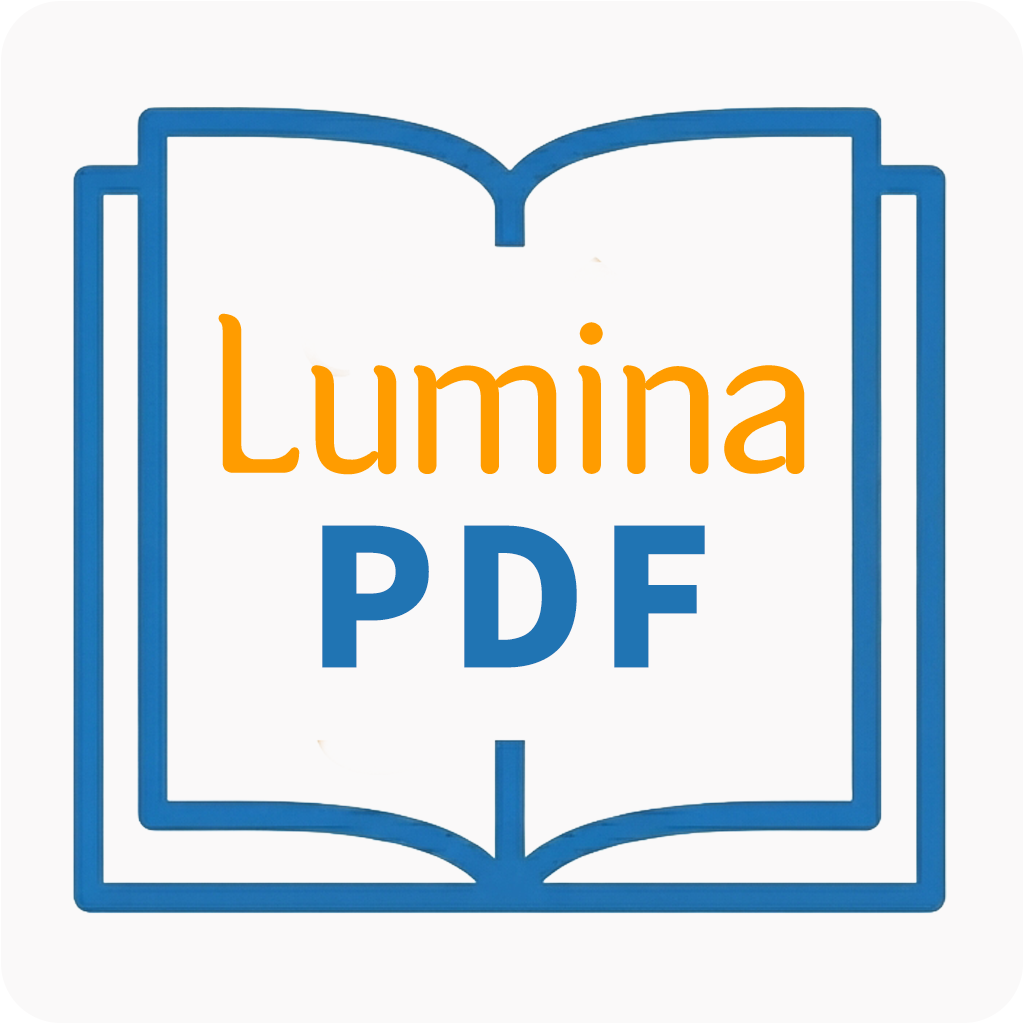
<style>
.page{position:relative;width:1024px;height:1024px;background:#faf9f9}
.page>*{position:absolute;margin:0}
.t1{font:200.7px "tearsfontvf12Variable_90.000ROND_0ital";color:#ff9c00}
.t2{font:190.1px "NotoSansTC-Black";letter-spacing:0.06em;color:#2074b3}
</style>
<div class="page">
<p class="t1" style="left:221px;top:316px;width:581px;height:156px">Lumina</p>
<p class="t2" style="left:322px;top:525px;width:383px;height:143px">PDF</p>
</div>
